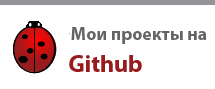
<style>
.page{position:relative;width:215px;height:89px;background:#ffffff}
.page>*{position:absolute;margin:0}
.t1{font:18px "MyriadPro-Bold";color:#636466}
.t2{font:24px "MyriadPro-Bold";color:#981b1e}
</style>
<div class="page">
<p class="t1" style="left:71px;top:27px;width:135px;height:17px">Moи проекты на</p>
<p class="t2" style="left:69px;top:55px;width:73px;height:17px">Github</p>
</div>
